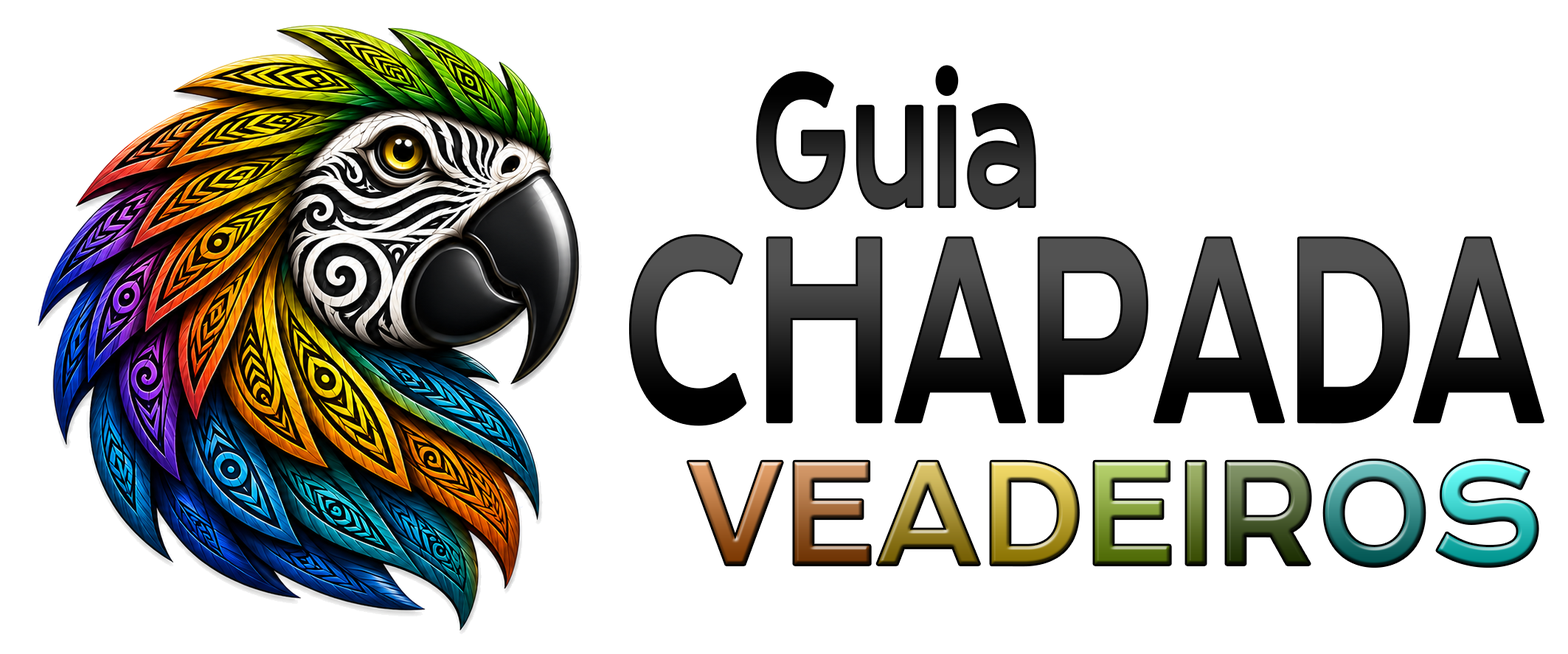
<style>
.page{position:relative;width:1568px;height:654px;background:#ffffff}
.page>*{position:absolute;margin:0}
.t1{font:170.7px "KronaOne-Regular";color:#2c2c2c;scale:0.57 1}
.t2{font:238.9px "KronaOne-Regular";scale:0.59 1}
.t3{font:133.8px "KronaOne-Regular";scale:0.84 1}
</style>
<div class="page">
<p class="t1" style="left:758px;top:67px;width:276px;height:141px">Guia</p>
<p class="t2" style="left:631px;top:236px;width:912px;height:188px">CHAPADA</p>
<p class="t3" style="left:688px;top:461px;width:849px;height:105px">VEADEIROS</p>
</div>
